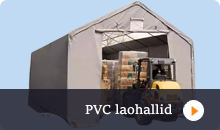
<style>
.page{position:relative;width:220px;height:130px;background:#c0daf3}
.page>*{position:absolute;margin:0}
.t1{font:14px "SitkaText";color:#ffffff}
</style>
<div class="page">
<p class="t1" style="left:85px;top:104px;width:87px;height:11px">PVC laohallid</p>
</div>
